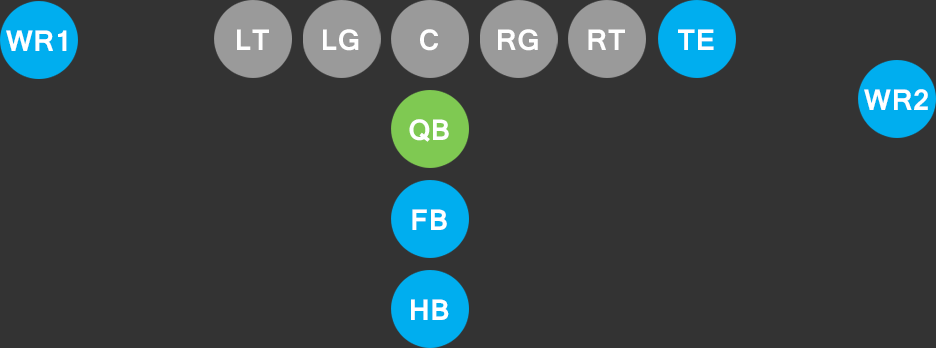
<style>
.page{position:relative;width:936px;height:348px;background:#333333}
.page>*{position:absolute;margin:0}
.t1{font:31.8px "Vrinda-Bold";color:#ffffff}
</style>
<div class="page">
<p class="t1" style="left:6px;top:30px;width:61px;height:21px">WR1</p>
<p class="t1" style="left:237px;top:29px;width:32px;height:21px">LT</p>
<p class="t1" style="left:323px;top:29px;width:36px;height:22px">LG</p>
<p class="t1" style="left:420px;top:29px;width:18px;height:22px">C</p>
<p class="t1" style="left:498px;top:29px;width:40px;height:22px">RG</p>
<p class="t1" style="left:588px;top:29px;width:37px;height:21px">RT</p>
<p class="t1" style="left:678px;top:29px;width:36px;height:21px">TE</p>
<p class="t1" style="left:864px;top:89px;width:64px;height:21px">WR2</p>
<p class="t1" style="left:409px;top:119px;width:40px;height:23px">QB</p>
<p class="t1" style="left:412px;top:209px;width:35px;height:21px">FB</p>
<p class="t1" style="left:411px;top:299px;width:38px;height:21px">HB</p>
</div>
